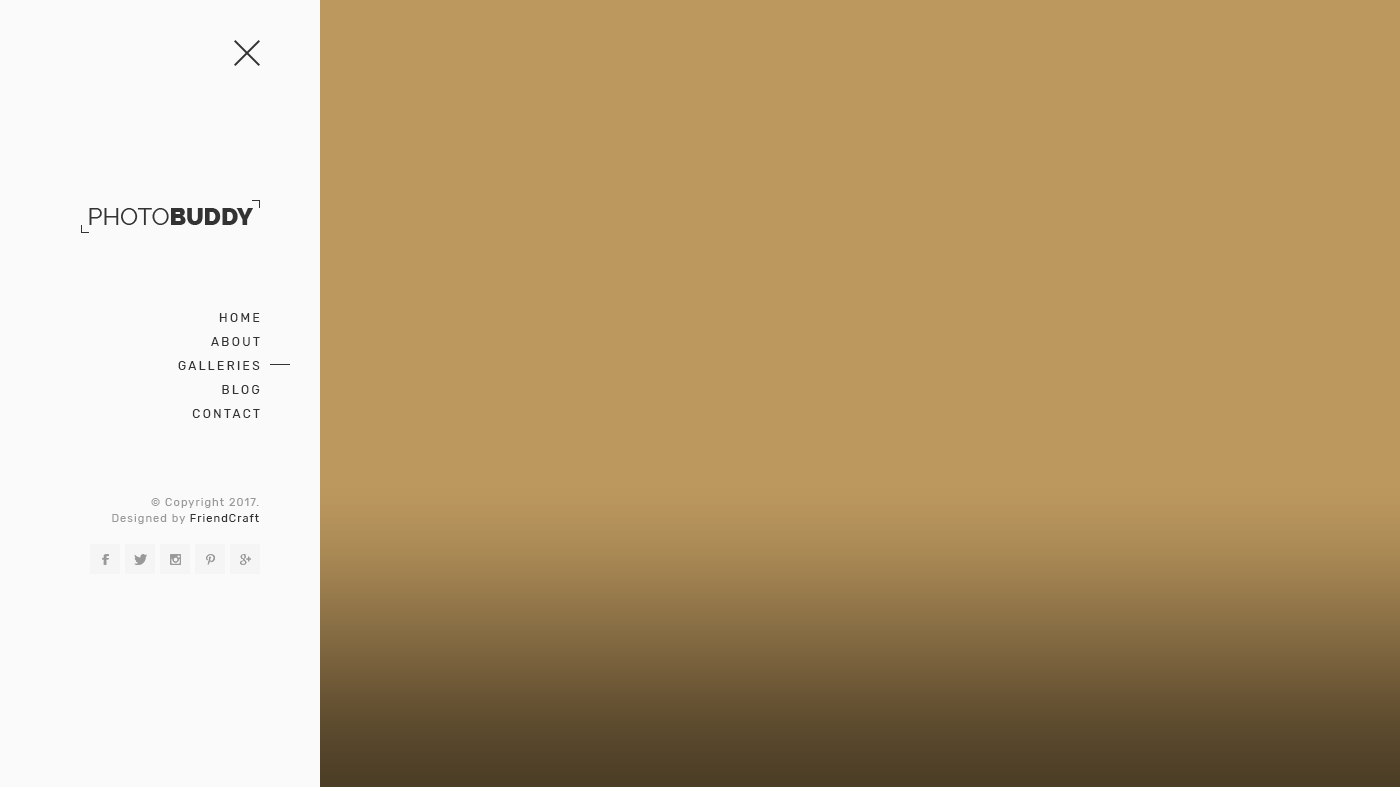
<style>
.page{position:relative;width:1400px;height:787px;background:#bc985e}
.page>*{position:absolute;margin:0}
.t1{font:12px "Rubik-Regular";letter-spacing:0.2em;color:#333333;text-transform:uppercase}
.t2{font:11px/16px "Rubik-Regular";letter-spacing:0.1em;color:#999999}
.t3{font:11px/16px "Rubik-Regular";letter-spacing:0.1em;color:#333333}
</style>
<div class="page">
<p class="t1" style="left:219px;top:313px;width:41px;height:9px">Home</p>
<p class="t1" style="left:211px;top:337px;width:49px;height:9px">About</p>
<p class="t1" style="left:178px;top:361px;width:82px;height:9px">Galleries</p>
<p class="t1" style="left:222px;top:385px;width:38px;height:9px">Blog</p>
<p class="t1" style="left:192px;top:409px;width:68px;height:9px">Contact</p>
<p class="t2" style="left:112px;top:498px;width:147px;height:26px;text-align:right">© Copyright 2017. <br>Designed by <span class="t3">FriendCraft</span></p>
</div>
